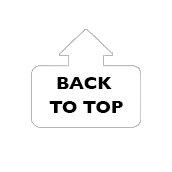
<style>
.page{position:relative;width:172px;height:172px;background:#ffffff}
.page>*{position:absolute;margin:0}
.t1{font:18px "GillSans-Bold";color:#000000}
</style>
<div class="page">
<p class="t1" style="left:57px;top:77px;width:55px;height:12px">BACK</p>
<p class="t1" style="left:49px;top:101px;width:74px;height:12px">TO TOP</p>
</div>
